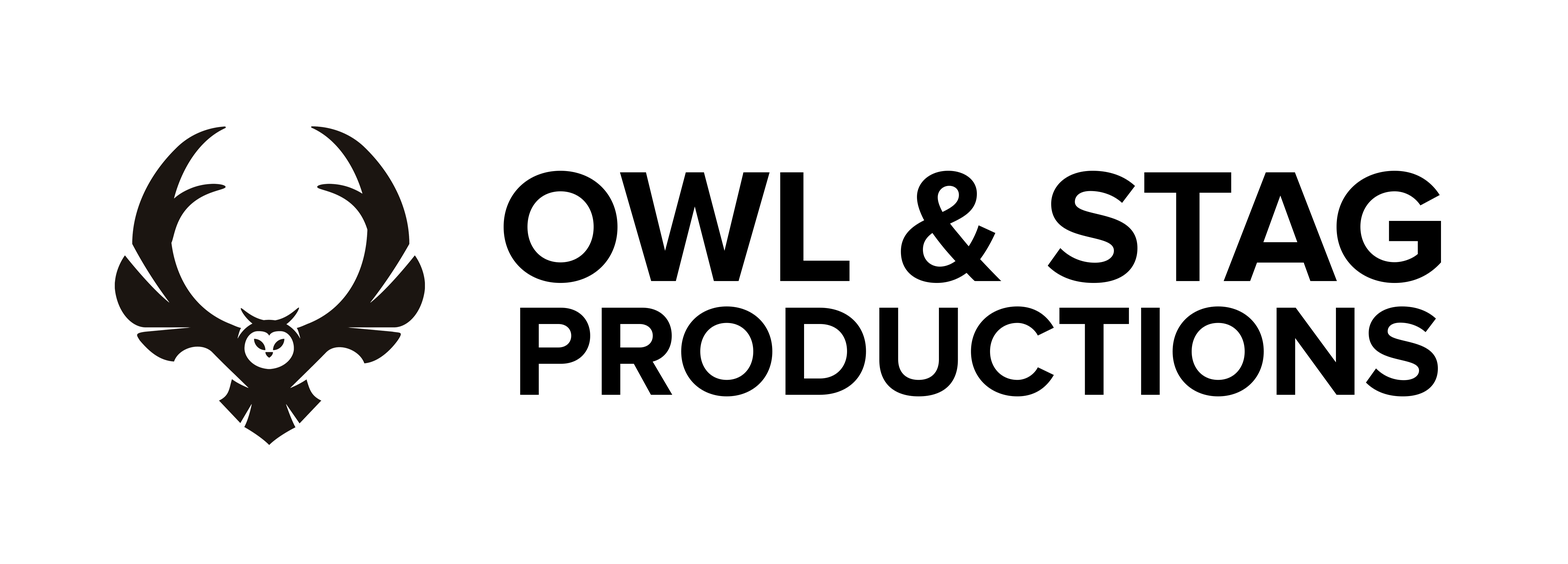
<style>
.page{position:relative;width:1568px;height:564px;background:#ffffff}
.page>*{position:absolute;margin:0}
.t1{font:163.3px "ProximaNova-Bold";color:#000000}
.t2{font:130.7px "ProximaNova-Bold";color:#000000}
</style>
<div class="page">
<p class="t1" style="left:504px;top:171px;width:937px;height:112px">OWL &amp; STAG</p>
<p class="t2" style="left:520px;top:307px;width:918px;height:90px">PRODUCTIONS</p>
</div>
